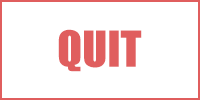
<style>
.page{position:relative;width:200px;height:100px;background:#ffffff}
.page>*{position:absolute;margin:0}
.t1{font:45.8px "Impact";color:#e05e5e}
</style>
<div class="page">
<p class="t1" style="left:58px;top:29px;width:84px;height:43px">QUIT</p>
</div>
